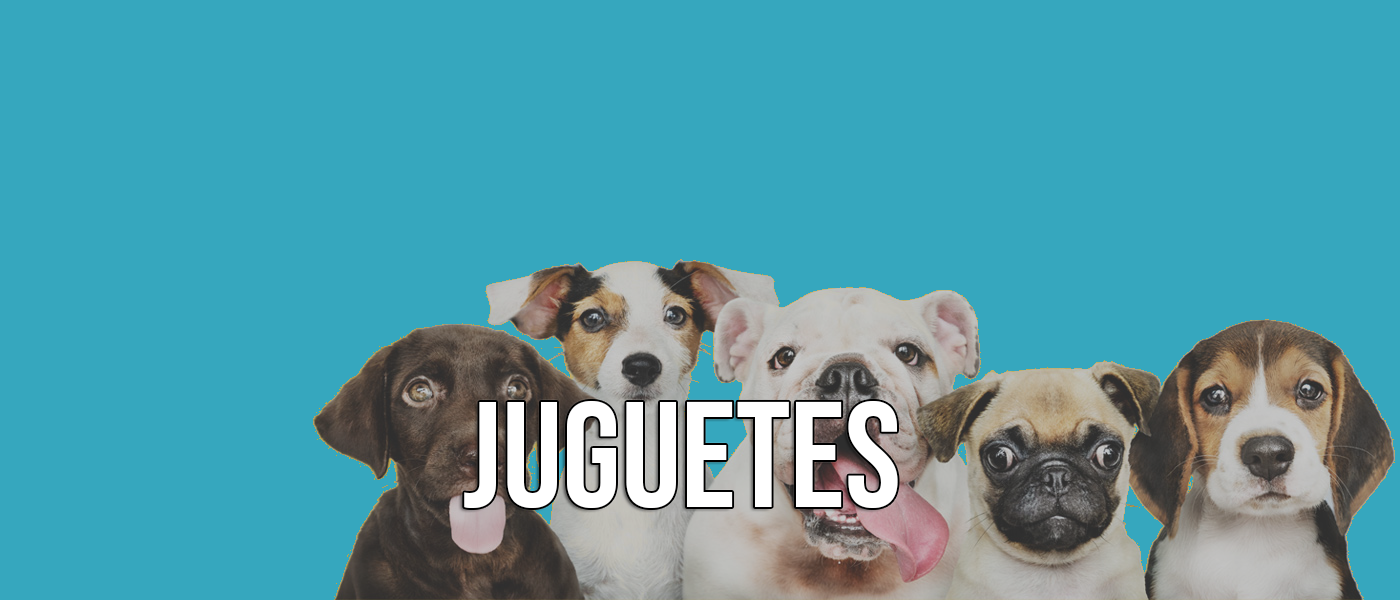
<style>
.page{position:relative;width:1400px;height:600px;background:#36a7be}
.page>*{position:absolute;margin:0}
.t1{font:149.5px "BebasNeue-Regular";color:#ffffff}
</style>
<div class="page">
<p class="t1" style="left:464px;top:400px;width:434px;height:108px">juguetes</p>
</div>
